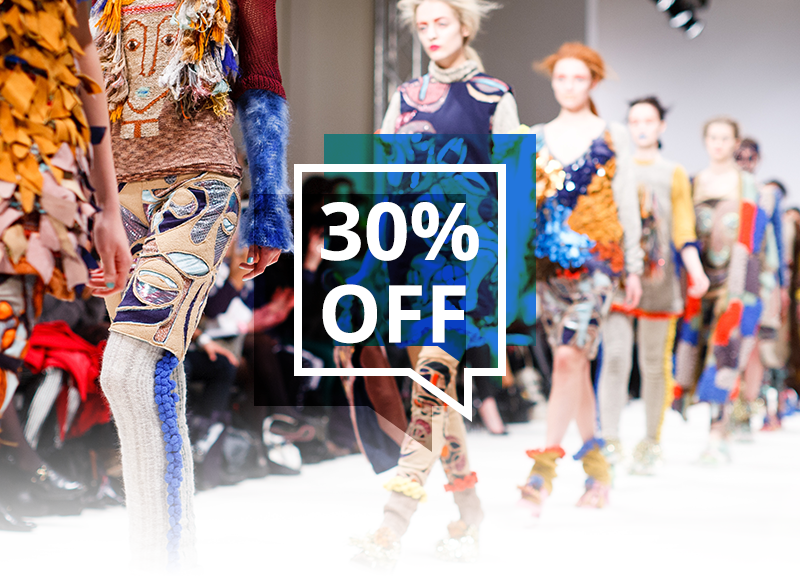
<style>
.page{position:relative;width:800px;height:576px}
.page>*{position:absolute;margin:0}
.t1{font:80px/80px "OpenSans-Bold";color:#ffffff}
</style>
<div class="page">
<p class="t1" style="left:321px;top:202px;width:158px;height:142px">30%<br>OFF</p>
</div>
